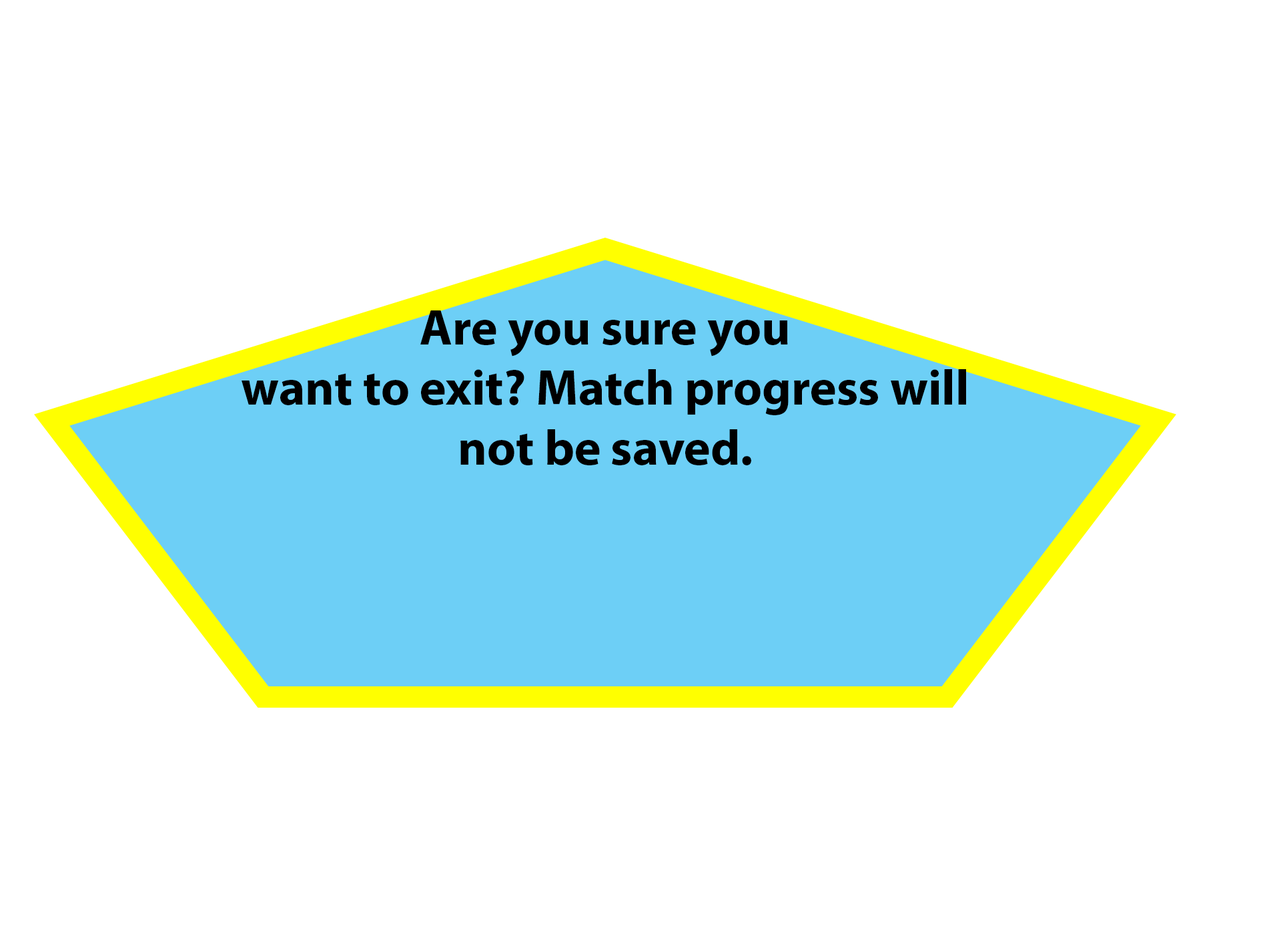
<style>
.page{position:relative;width:1261px;height:946px;background:#ffffff}
.page>*{position:absolute;margin:0}
.t1{font:50px "MyriadPro-Bold";color:#000000}
</style>
<div class="page">
<p class="t1" style="left:242px;top:310px;width:724px;height:155px;text-align:center">Are you sure you want to exit? Match progress will not be saved.</p>
</div>
